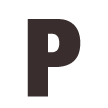
<style>
.page{position:relative;width:108px;height:108px;background:#ffffff}
.page>*{position:absolute;margin:0}
.t1{font:108px "HelveticaNeue-CondensedBlack";letter-spacing:0.06em;color:#3a2e2e}
</style>
<div class="page">
<p class="t1" style="left:27px;top:19px;width:54px;height:78px">P</p>
</div>
